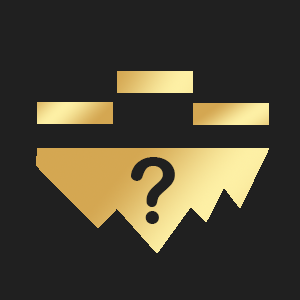
<style>
.page{position:relative;width:300px;height:300px;background:#202020}
.page>*{position:absolute;margin:0}
.t1{font:89.6px "ArialRoundedMTBold";color:#202020}
</style>
<div class="page">
<p class="t1" style="left:131px;top:157px;width:44px;height:67px">?</p>
</div>
